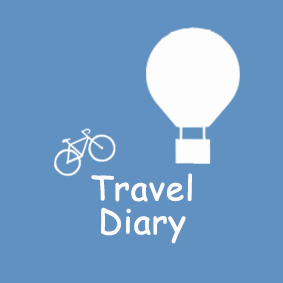
<style>
.page{position:relative;width:283px;height:283px;background:#6191c1}
.page>*{position:absolute;margin:0}
.t1{font:33.5px/33.5px "ComicSansMS";color:#fdfcfc;font-weight:bold}
</style>
<div class="page">
<p class="t1" style="left:91px;top:173px;width:101px;height:71px;text-align:center">Travel<br>Diary</p>
</div>
